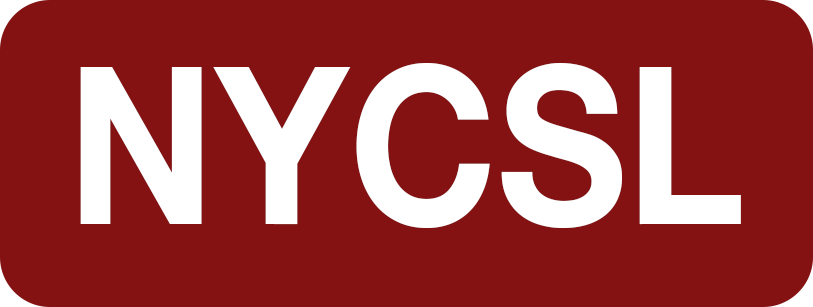
<style>
.page{position:relative;width:813px;height:307px;background:#841212}
.page>*{position:absolute;margin:0}
.t1{font:220px "HelveticaNeue-Bold";color:#ffffff;scale:0.91 1}
</style>
<div class="page">
<p class="t1" style="left:80px;top:63px;width:661px;height:165px">NYCSL</p>
</div>
